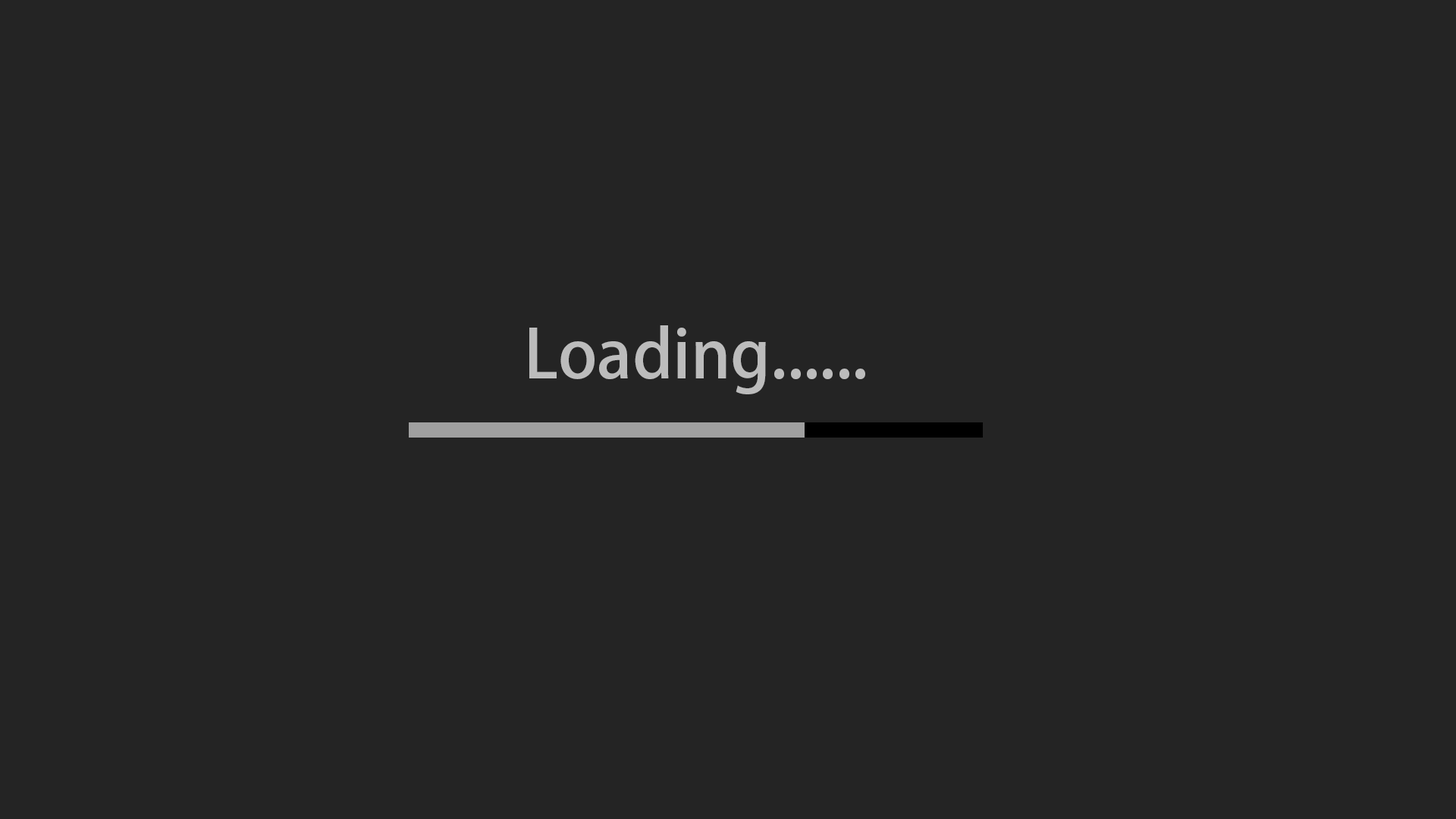
<style>
.page{position:relative;width:1456px;height:819px;background:#242424}
.page>*{position:absolute;margin:0}
.t1{font:66.5px "AdobeHeitiStd-Regular";color:#bcbcbc}
</style>
<div class="page">
<p class="t1" style="left:529px;top:325px;width:336px;height:69px">Loading......</p>
</div>
